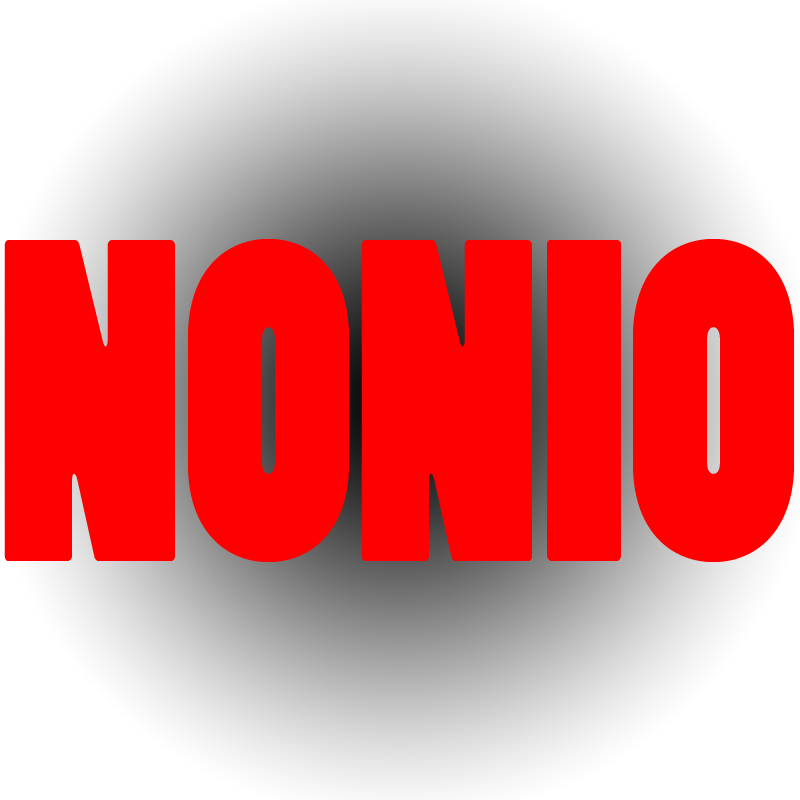
<style>
.page{position:relative;width:800px;height:800px;background:#ff0000}
.page>*{position:absolute;margin:0}
.t1{font:427.6px "PoplarStd";color:#ff0000;scale:0.9 1}
</style>
<div class="page">
<p class="t1" style="left:4px;top:239px;width:790px;height:323px">NONIO</p>
</div>
